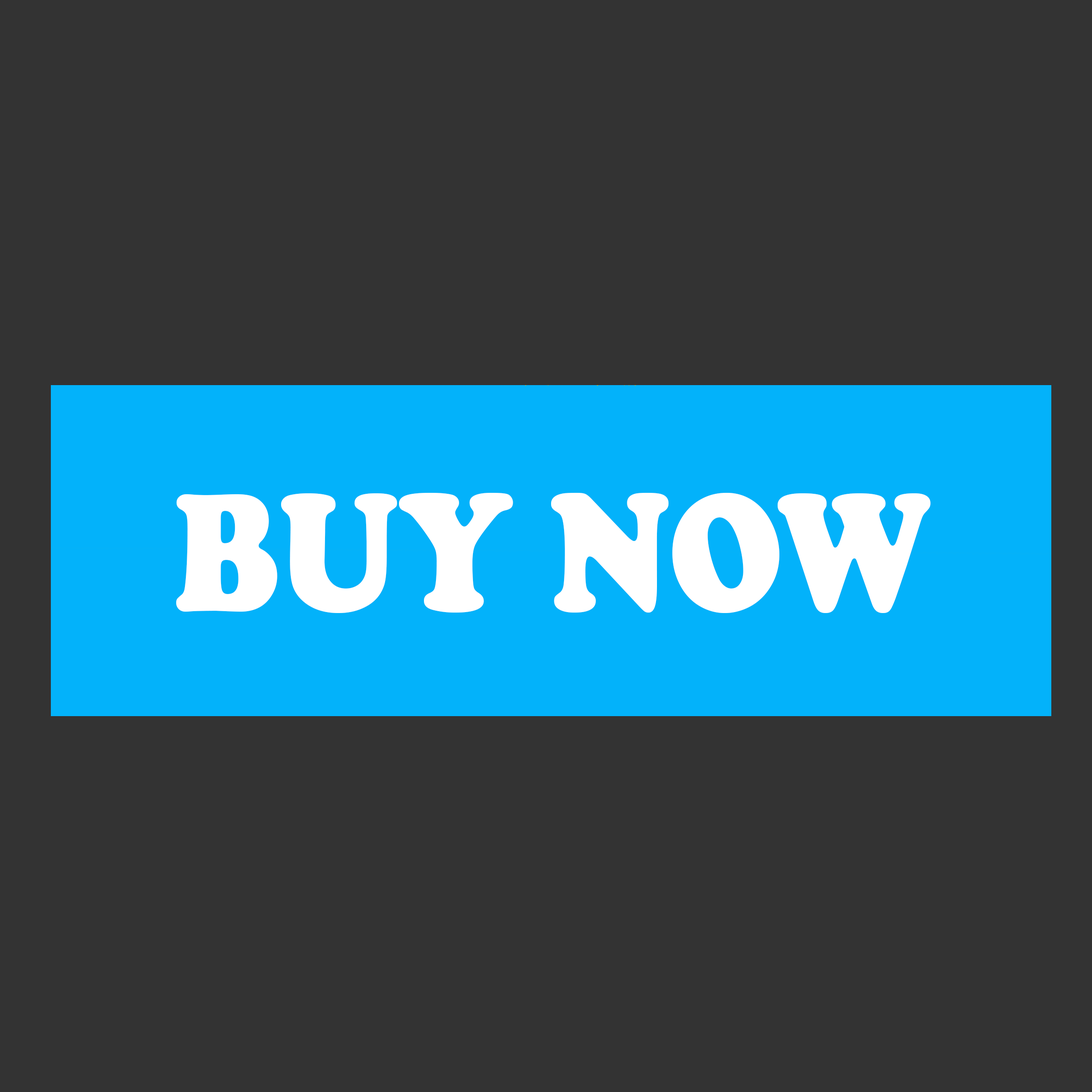
<style>
.page{position:relative;width:1092px;height:1092px;background:#333333}
.page>*{position:absolute;margin:0}
.t1{font:173.2px "CooperBlack";color:#ffffff;scale:0.84 1}
</style>
<div class="page">
<p class="t1" style="left:176px;top:493px;width:755px;height:120px">BUY NOW</p>
</div>
